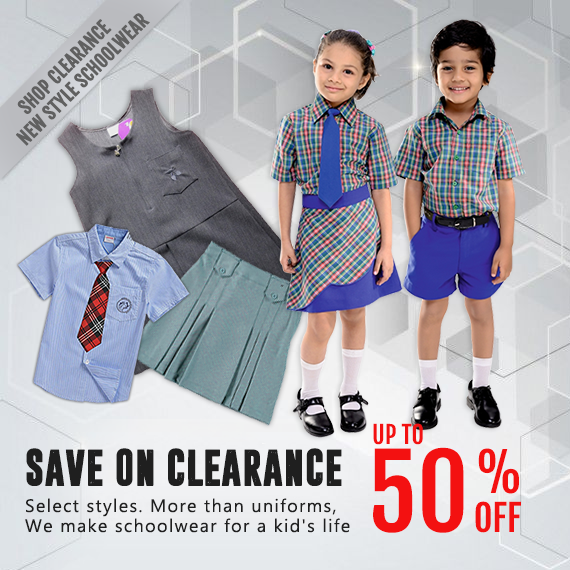
<style>
.page{position:relative;width:570px;height:570px}
.page>*{position:absolute;margin:0}
.t1{font:18px "FjallaOne-Regular";color:#606060;text-transform:uppercase;font-weight:bold}
.t2{font:18px "FjallaOne-Regular";color:#606060;font-weight:bold}
.t3{font:24px "FjallaOne-Regular";color:#f31111;text-transform:uppercase}
.t4{font:40px "Dreamwalker";color:#1f1f1f;text-transform:uppercase}
.t5{font:100px "FjallaOne-Regular";color:#f31111;text-transform:uppercase}
.t6{font:52px "FjallaOne-Regular";color:#f31111;text-transform:uppercase}
.t7{font:18px/20px "Ebrima";letter-spacing:0.075em;color:#1f1f1f}
.t8{font:36px "FjallaOne-Regular";color:#f31111;text-transform:uppercase}
</style>
<div class="page">
<p class="t1" style="left:16px;top:13px;width:134px;height:133px;rotate:-45deg">NEW STYLE schoolwear</p>
<p class="t2" style="left:17px;top:19px;width:95px;height:95px;rotate:-45deg">SHOP CLEARANCE</p>
<p class="t3" style="left:373px;top:423px;width:50px;height:22px">UP TO</p>
<p class="t4" style="left:26px;top:448px;width:316px;height:38px">Save on Clearance</p>
<p class="t5" style="left:373px;top:447px;width:91px;height:86px">50</p>
<p class="t6" style="left:478px;top:448px;width:41px;height:46px">%</p>
<p class="t7" style="left:25px;top:498px;width:325px;height:35px">Select styles. More than uniforms, <br>We make schoolwear for a kid's life</p>
<p class="t8" style="left:475px;top:501px;width:46px;height:32px">OFF</p>
</div>
